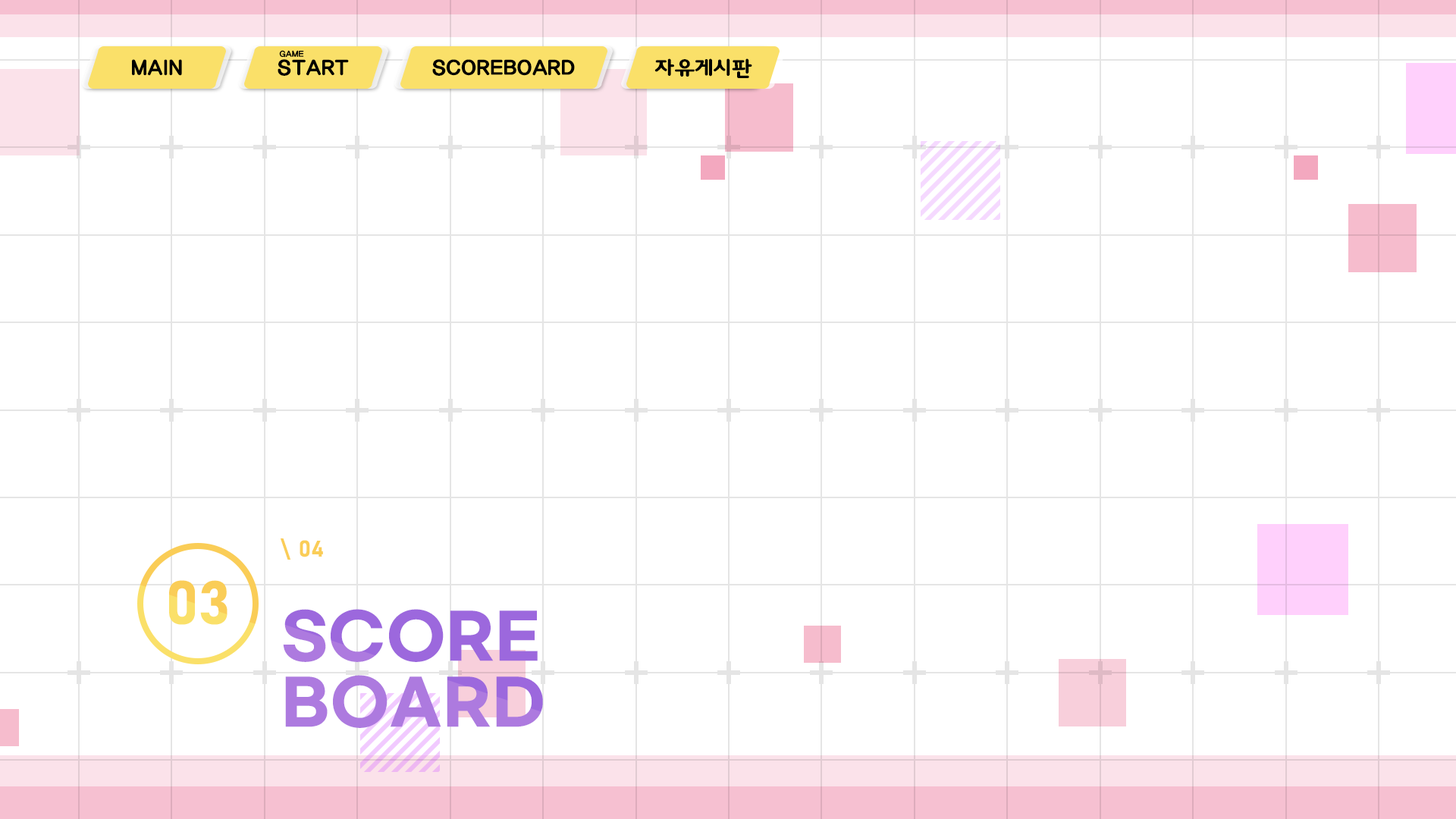
<style>
.page{position:relative;width:1456px;height:819px;background:#ffffff}
.page>*{position:absolute;margin:0}
.t1{font:8.5px "KoreanSDNR-B";color:#000000}
.t2{font:21.2px "KoreanSDNR-B";color:#000000}
.t3{font:22.7px "Bahnschrift-Bold";color:#facd57}
.t4{font:60.7px "Bahnschrift-Bold";color:#fae069}
.t5{font:61.5px/66.1px "GmarketSansBold";letter-spacing:0.02em;color:#ad7adf}
</style>
<div class="page">
<p class="t1" style="left:279px;top:50px;width:25px;height:8px">GAME</p>
<p class="t2" style="left:132px;top:59px;width:50px;height:17px">MAIN</p>
<p class="t2" style="left:278px;top:59px;width:71px;height:17px">START</p>
<p class="t2" style="left:432px;top:59px;width:143px;height:17px">SCOREBOARD</p>
<p class="t2" style="left:654px;top:58px;width:98px;height:20px">자유게시판</p>
<p class="t3" style="left:281px;top:538px;width:10px;height:22px;rotate:180deg">/</p>
<p class="t3" style="left:300px;top:540px;width:23px;height:17px">04</p>
<p class="t4" style="left:169px;top:580px;width:58px;height:45px">03</p>
<p class="t5" style="left:283px;top:609px;width:260px;height:119px">SCORE<br>BOARD</p>
</div>
